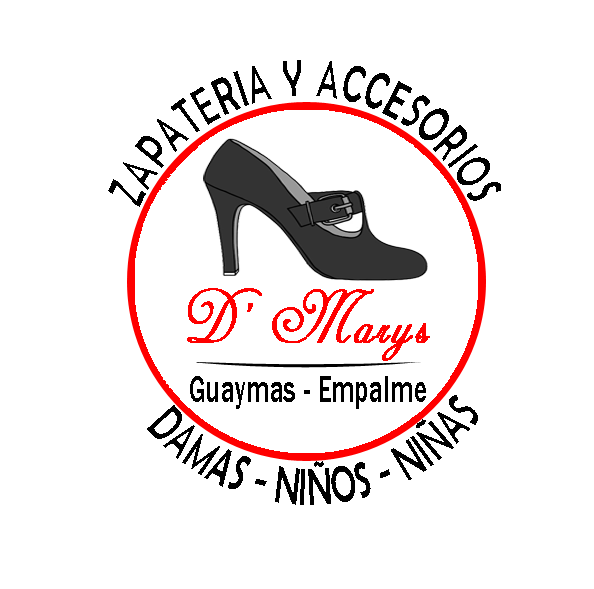
<style>
.page{position:relative;width:594px;height:589px;background:#ffffff}
.page>*{position:absolute;margin:0}
.t1{font:52.2px/11.5px "BerlinSansFB-Reg";letter-spacing:0.02em;color:#000000;scale:0.67 1}
.t2{font:41.8px/11.5px "Gautami";letter-spacing:0.02em;color:#000000;scale:0.67 1}
.t3{font:86px "AdineKirnberg-Script";letter-spacing:0.02em;color:#ff0000;font-weight:bold;scale:0.85 1}
.t4{font:38.8px "FranklinGothic-Medium";letter-spacing:0.02em;color:#000000;scale:0.67 1}
.t5{font:52.2px/12.7px "BerlinSansFB-Reg";letter-spacing:0.02em;color:#000000;scale:0.67 1}
</style>
<div class="page">
<p class="t1" style="left:108px;top:60px;width:393px;height:147px"><span class="t2">  </span>ZAPATERIA Y ACCESORIOS</p>
<p class="t3" style="left:187px;top:288px;width:243px;height:73px">D’ Marys</p>
<p class="t4" style="left:190px;top:376px;width:236px;height:33px">Guaymas - Empalme</p>
<p class="t5" style="left:147px;top:395px;width:331px;height:110px">DAMAS - NIÑOS - NIÑAS</p>
</div>
